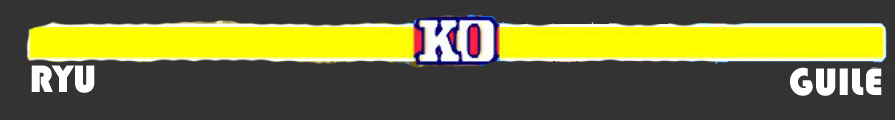
<style>
.page{position:relative;width:895px;height:120px;background:#333333}
.page>*{position:absolute;margin:0}
.t1{font:39.9px "Bauhaus93";color:#ffffff}
</style>
<div class="page">
<p class="t1" style="left:31px;top:65px;width:64px;height:28px">RYU</p>
<p class="t1" style="left:790px;top:67px;width:92px;height:29px">GUILE</p>
</div>
